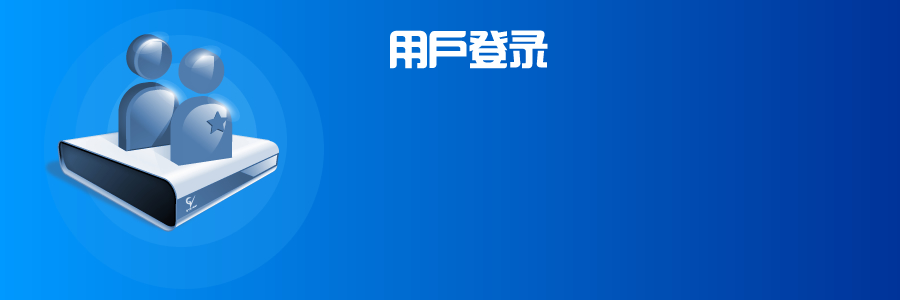
<style>
.page{position:relative;width:900px;height:300px}
.page>*{position:absolute;margin:0}
.t1{font:40px "FZHZGBJW--GB1-0";color:#feffff}
</style>
<div class="page">
<p class="t1" style="left:390px;top:30px;width:158px;height:39px">用户登录</p>
</div>
